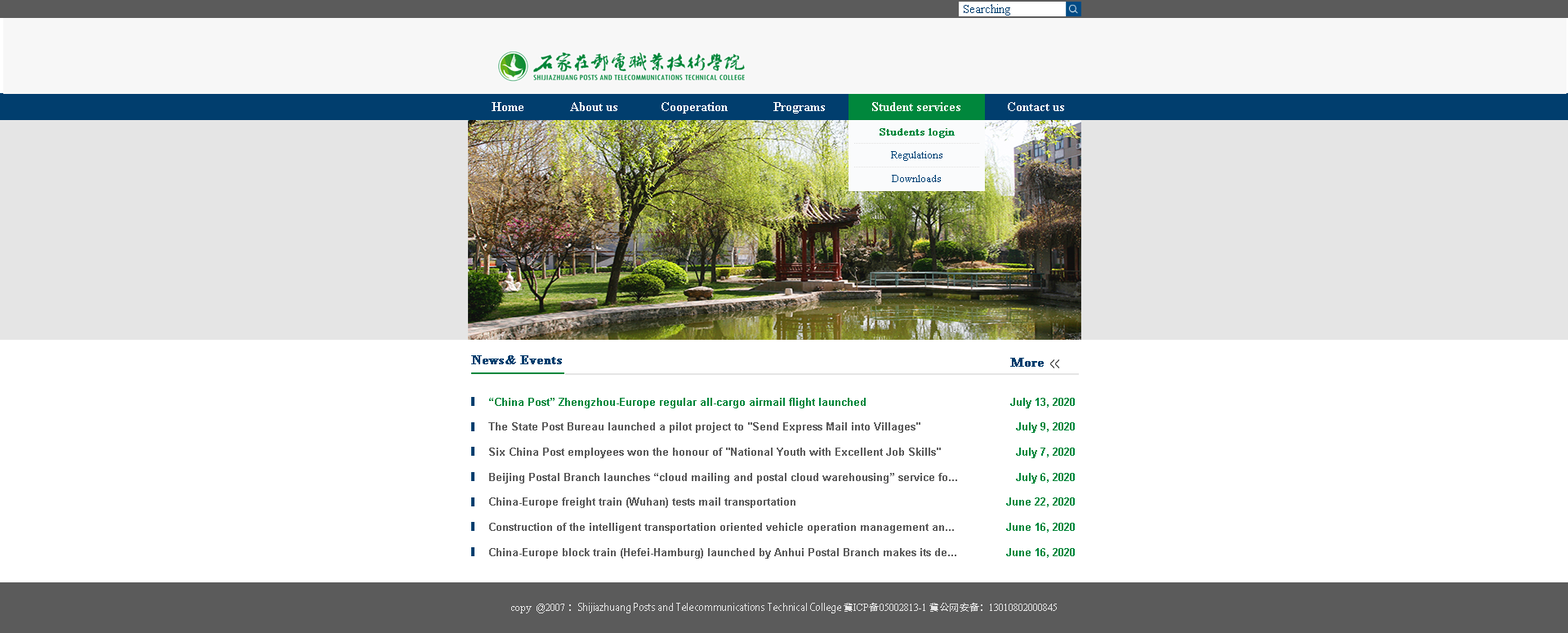
<style>
.page{position:relative;width:1568px;height:633px;background:#ffffff}
.page>*{position:absolute;margin:0}
.t1{font:12px "TimesNewRomanPSMT";color:#013e6e}
.t2{font:13.1px "TimesNewRomanPS-BoldMT";color:#ffffff}
.t3{font:10.9px "TimesNewRomanPSMT";color:#00873c;font-weight:bold}
.t4{font:10.9px "TimesNewRomanPSMT";color:#004276}
.t5{font:13.1px "TimesNewRomanPS-BoldMT";color:#013e6e;font-weight:bold}
.t6{font:20.7px "ArialMT";color:#5b5b5b;scale:0.42 1}
.t7{font:10.9px/25px "Arial-BoldMT";color:#5b5b5b}
.t8{font:10.9px "Arial-BoldMT";color:#00873c}
.t9{font:10.9px/25px "Arial-BoldMT";color:#00873c}
.t10{font:9.8px "AdobeHeitiStd-Regular";color:#e5e5e5}
.t11{font:9.8px "TimesNewRomanPSMT";color:#e5e5e5}
</style>
<div class="page">
<p class="t1" style="left:964px;top:4px;width:46px;height:12px">Searching</p>
<p class="t2" style="left:492px;top:102px;width:572px;height:12px">Home              About us             Cooperation              Programs              Student services              Contact us</p>
<p class="t2" style="left:872px;top:102px;width:88px;height:9px">Student services</p>
<p class="t2" style="left:872px;top:102px;width:88px;height:9px">Student services</p>
<p class="t3" style="left:880px;top:128px;width:75px;height:10px">Students login</p>
<p class="t4" style="left:891px;top:151px;width:51px;height:10px">Regulations</p>
<p class="t4" style="left:891px;top:151px;width:51px;height:10px">Regulations</p>
<p class="t4" style="left:892px;top:175px;width:49px;height:7px">Downloads</p>
<p class="t4" style="left:892px;top:175px;width:49px;height:7px">Downloads</p>
<p class="t5" style="left:471px;top:355px;width:91px;height:9px">News&amp; Events</p>
<p class="t5" style="left:1010px;top:358px;width:34px;height:9px">More</p>
<p class="t6" style="left:1050px;top:359px;width:9px;height:9px">&lt;&lt;</p>
<p class="t7" style="left:488px;top:398px;width:469px;height:161px">“China Post” Zhengzhou-Europe regular all-cargo airmail flight launched<br>The State Post Bureau launched a pilot project to "Send Express Mail into Villages"<br>Six China Post employees won the honour of "National Youth with Excellent Job Skills"<br>Beijing Postal Branch launches “cloud mailing and postal cloud warehousing” service fo...<br>China-Europe freight train (Wuhan) tests mail transportation<br>Construction of the intelligent transportation oriented vehicle operation management an...<br>China-Europe block train (Hefei-Hamburg) launched by Anhui Postal Branch makes its de...</p>
<p class="t8" style="left:489px;top:398px;width:377px;height:10px">“China Post” Zhengzhou-Europe regular all-cargo airmail flight launched</p>
<p class="t9" style="left:1006px;top:398px;width:69px;height:160px;text-align:right">July 13, 2020<br>July 9, 2020<br>July 7, 2020<br>July 6, 2020<br>June 22, 2020<br>June 16, 2020<br>June 16, 2020</p>
<p class="t10" style="left:511px;top:603px;width:546px;height:10px"><span class="t11">copy  @2007 </span>：Shijiazhuang Posts and Telecommunications Technical College 冀<span class="t11">ICP</span>备<span class="t11">05002813-1 </span>冀公网安备：<span class="t11">13010802000845</span></p>
</div>
